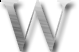
<style>
.page{position:relative;width:79px;height:52px;background:#ffffff}
.page>*{position:absolute;margin:0}
.t1{font:75px "Baskerville";font-variant:small-caps}
</style>
<div class="page">
<p class="t1" style="left:0px;top:0px;width:71px;height:51px">W</p>
</div>
